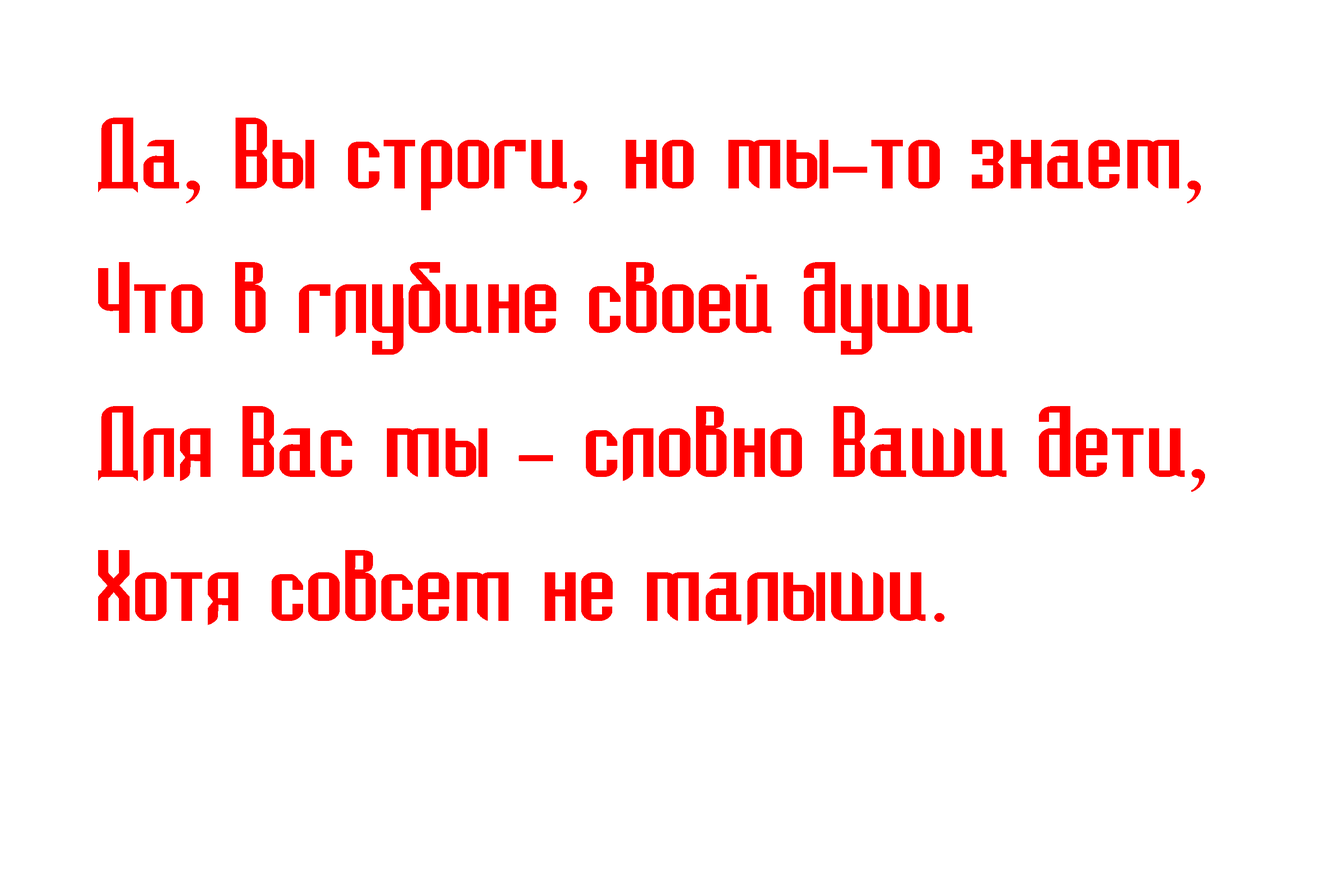
<style>
.page{position:relative;width:1342px;height:889px;background:#ffffff}
.page>*{position:absolute;margin:0}
.t1{font:92.8px/144px "Bedrock-Cyr-Regular";color:#ff0000;scale:1.18 1}
.t2{font:92.8px/144px "BellMT";color:#ff0000;scale:1.18 1}
</style>
<div class="page">
<p class="t1" style="left:98px;top:118px;width:1107px;height:507px">Да<span class="t2">, </span>Вы строги<span class="t2">, </span>но мы<span class="t2">-</span>то знаем<span class="t2">,<br></span>Что в глубине своей души<br>Для Вас мы<span class="t2"> - </span>словно Ваши дети<span class="t2">,<br></span>Хотя совсем не малыши<span class="t2">.</span></p>
</div>
